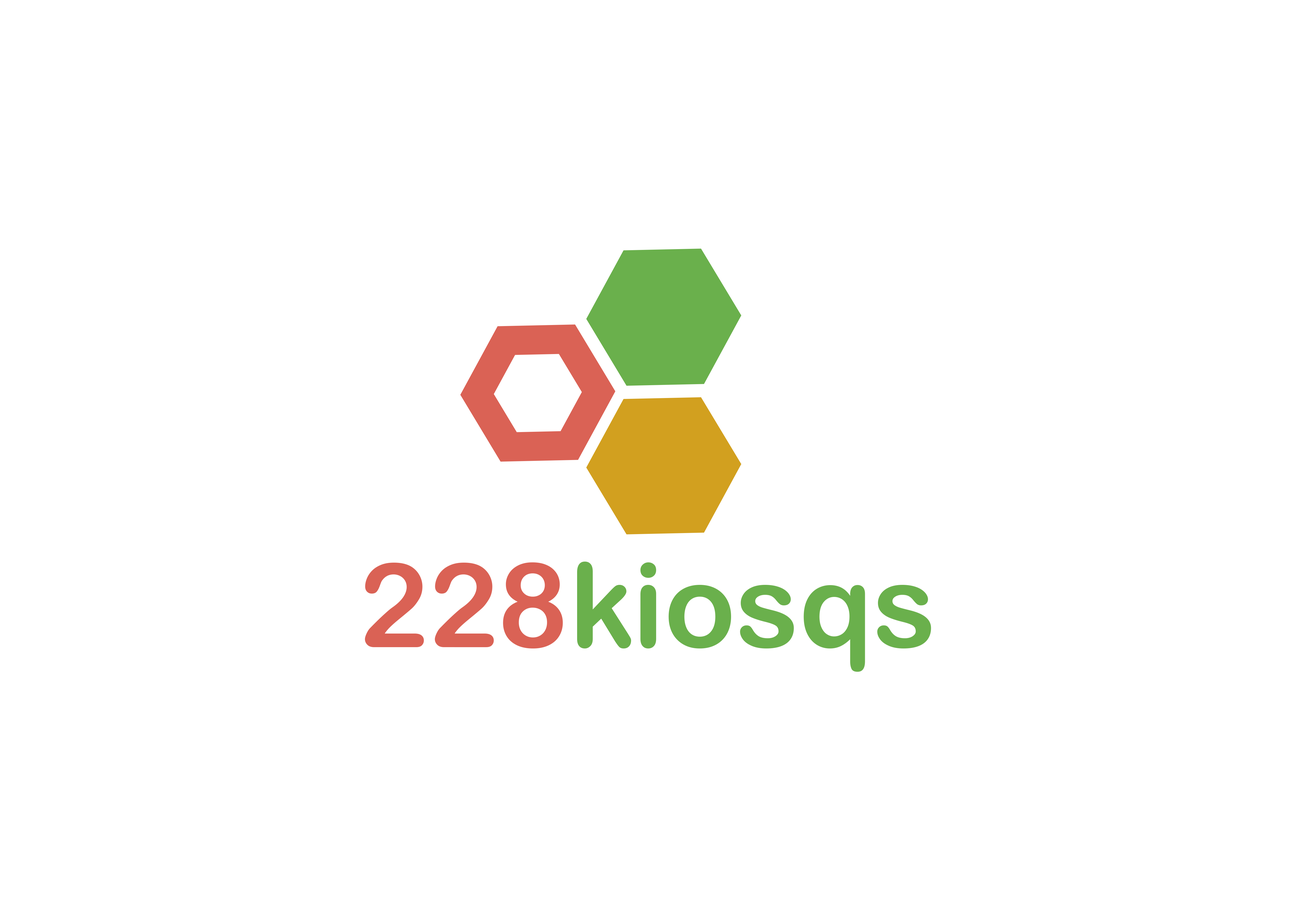
<style>
.page{position:relative;width:1299px;height:918px;background:#ffffff}
.page>*{position:absolute;margin:0}
.t1{font:117.5px "ArialRoundedMTBold";color:#6ab04c}
.t2{font:117.5px "ArialRoundedMTBold";color:#da6255}
</style>
<div class="page">
<p class="t1" style="left:365px;top:562px;width:566px;height:110px"><span class="t2">228</span>kiosqs</p>
</div>
